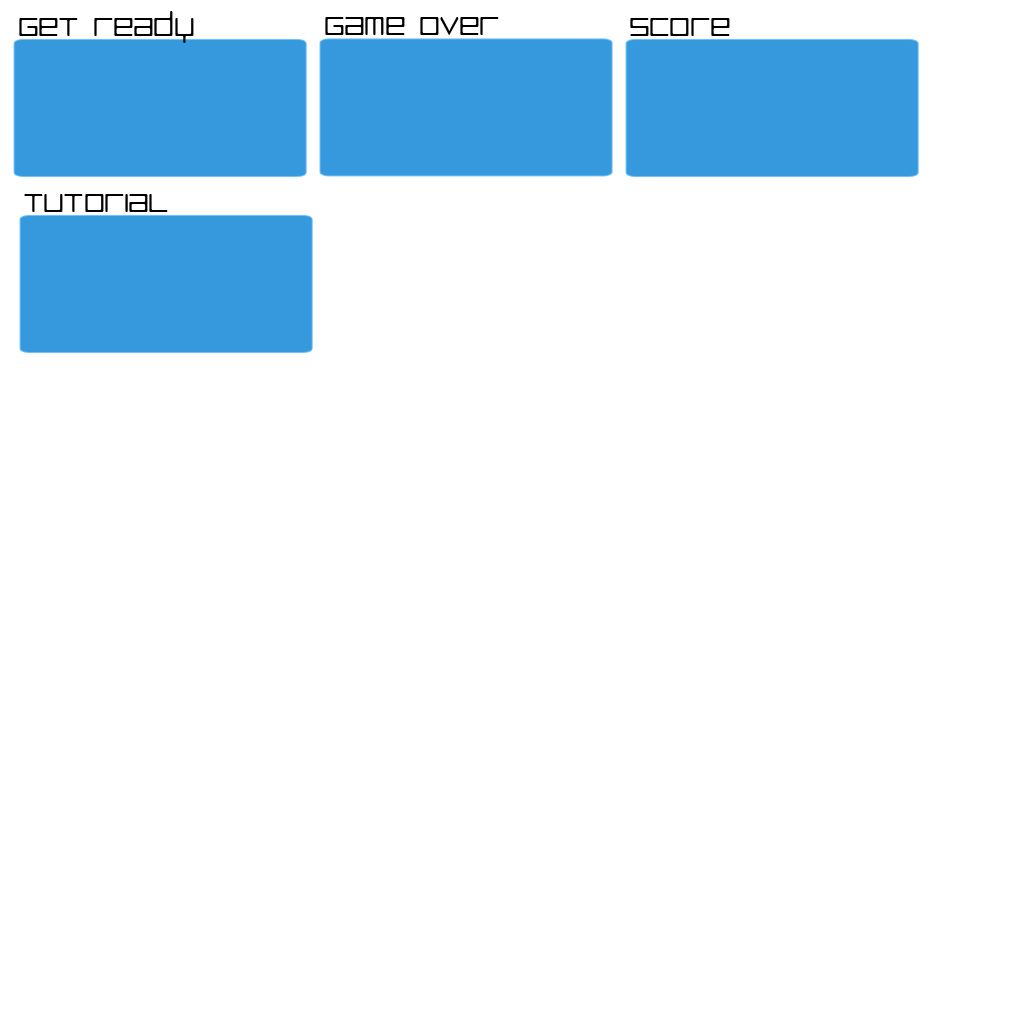
<style>
.page{position:relative;width:1024px;height:1024px;background:#ffffff}
.page>*{position:absolute;margin:0}
.t1{font:32.3px "LuggageRoundLight";letter-spacing:-0.02em;color:#010101}
</style>
<div class="page">
<p class="t1" style="left:19px;top:11px;width:175px;height:32px">get ready</p>
<p class="t1" style="left:325px;top:17px;width:174px;height:18px">game over</p>
<p class="t1" style="left:630px;top:18px;width:100px;height:18px">Score</p>
<p class="t1" style="left:24px;top:194px;width:144px;height:18px">Tutorial</p>
</div>
